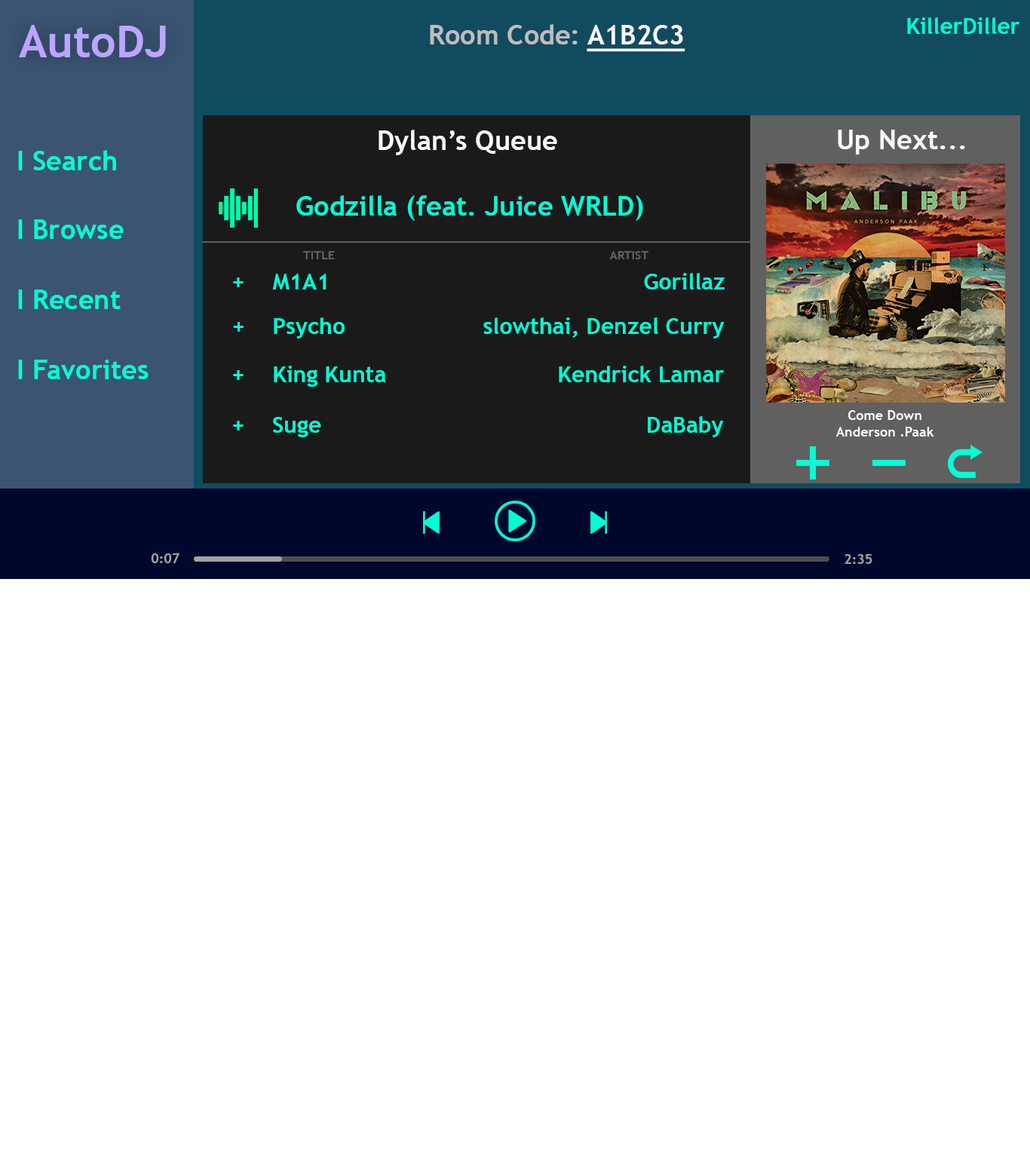
<style>
.page{position:relative;width:1030px;height:1158px;background:#ffffff}
.page>*{position:absolute;margin:0}
.t1{font:22.6px "TrebuchetMS-Bold";color:#00ffd5}
.t2{font:44.4px "TrebuchetMS-Bold";color:#baa5ff}
.t3{font:27.1px "TrebuchetMS-Bold";color:#bebcbc}
.t4{font:27.1px "TrebuchetMS-Bold";color:#f8f8f8;text-decoration:underline}
.t5{font:27.1px "TrebuchetMS-Bold";color:#f8f8f8}
.t6{font:27.1px "TrebuchetMS-Bold";color:#00ffd5}
.t7{font:12.1px "TrebuchetMS-Bold";color:#606060}
.t8{font:13.6px "TrebuchetMS-Bold";color:#f8f8f8}
.t9{font:13.5px "TrebuchetMS-Bold";color:#a1a1a1}
</style>
<div class="page">
<p class="t1" style="left:907px;top:17px;width:112px;height:17px">KillerDiller</p>
<p class="t2" style="left:19px;top:25px;width:147px;height:32px">AutoDJ</p>
<p class="t3" style="left:430px;top:24px;width:255px;height:28px">Room Code: <span class="t4">A1B2C3</span></p>
<p class="t5" style="left:378px;top:130px;width:179px;height:25px">Dylan’s Queue</p>
<p class="t5" style="left:838px;top:130px;width:127px;height:25px">Up Next...</p>
<p class="t6" style="left:18px;top:150px;width:98px;height:20px">I Search</p>
<p class="t6" style="left:296px;top:195px;width:347px;height:26px">Godzilla (feat. Juice WRLD)</p>
<p class="t6" style="left:18px;top:219px;width:106px;height:20px">I Browse</p>
<p class="t7" style="left:303px;top:251px;width:32px;height:8px">TITLE</p>
<p class="t7" style="left:609px;top:251px;width:39px;height:8px">ARTIST</p>
<p class="t1" style="left:233px;top:273px;width:491px;height:16px">+   M1A1                                              Gorillaz</p>
<p class="t6" style="left:18px;top:289px;width:103px;height:20px">I Recent</p>
<p class="t1" style="left:233px;top:317px;width:491px;height:21px">+    Psycho            slowthai, Denzel Curry</p>
<p class="t6" style="left:18px;top:360px;width:131px;height:19px">I Favorites</p>
<p class="t1" style="left:233px;top:366px;width:491px;height:21px">+   King Kunta                Kendrick Lamar</p>
<p class="t8" style="left:835px;top:410px;width:99px;height:26px;text-align:center">Come Down<br>Anderson .Paak</p>
<p class="t1" style="left:233px;top:416px;width:491px;height:21px">+    Suge                            DaBaby</p>
<p class="t9" style="left:151px;top:553px;width:28px;height:10px">0:07</p>
<p class="t9" style="left:844px;top:554px;width:28px;height:10px">2:35</p>
</div>
